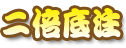
<style>
.page{position:relative;width:126px;height:48px;background:#ffffff}
.page>*{position:absolute;margin:0}
.t1{font:31.9px "TKanTingLiu-Ultra";scale:0.95 1}
</style>
<div class="page">
<p class="t1" style="left:3px;top:8px;width:118px;height:31px">二倍底注</p>
</div>
